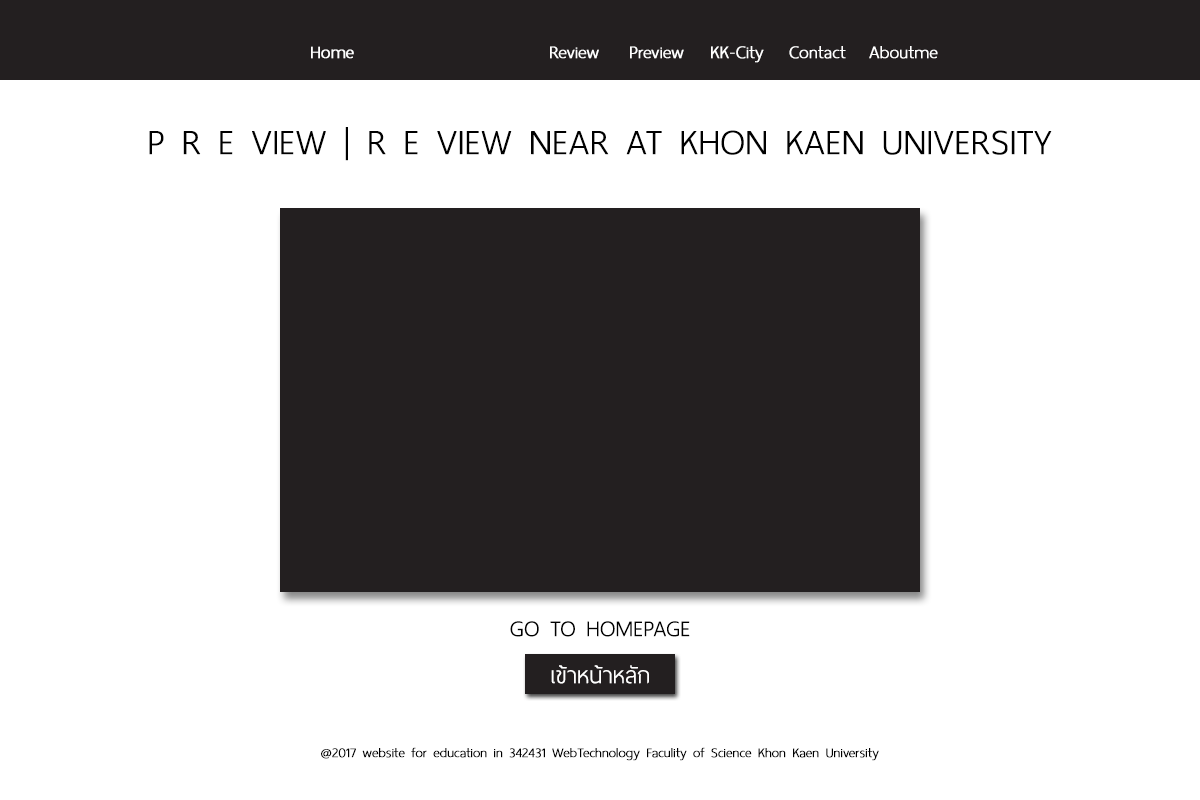
<style>
.page{position:relative;width:1200px;height:800px;background:#ffffff}
.page>*{position:absolute;margin:0}
.t1{font:24px "ThaiSansNeue-ExtraLight";color:#ffffff;font-weight:bold}
.t2{font:48px "ThaiSansNeue-ExtraLight";color:#000000;font-weight:bold}
.t3{font:30px "ThaiSansNeue-ExtraLight";color:#000000;font-weight:bold}
.t4{font:30px "ThaiSansNeue-ExtraLight";color:#ffffff;font-weight:bold}
.t5{font:18px "ThaiSansNeue-ExtraLight";color:#000000;font-weight:bold}
</style>
<div class="page">
<p class="t1" style="left:311px;top:46px;width:43px;height:13px">Home</p>
<p class="t1" style="left:550px;top:46px;width:49px;height:13px">Review</p>
<p class="t1" style="left:630px;top:46px;width:54px;height:13px">Preview</p>
<p class="t1" style="left:711px;top:46px;width:53px;height:17px">KK-City</p>
<p class="t1" style="left:789px;top:46px;width:57px;height:13px">Contact</p>
<p class="t1" style="left:869px;top:46px;width:69px;height:13px">Aboutme</p>
<p class="t2" style="left:149px;top:127px;width:903px;height:34px">P R E VIEW | R E VIEW NEAR AT KHON KAEN UNIVERSITY</p>
<p class="t3" style="left:510px;top:621px;width:180px;height:16px">GO TO HOMEPAGE</p>
<p class="t4" style="left:551px;top:665px;width:98px;height:19px">เข้าหน้าหลัก</p>
<p class="t5" style="left:321px;top:747px;width:558px;height:14px">@2017 website for education in 342431 WebTechnology Faculity of Science Khon Kaen University</p>
</div>
